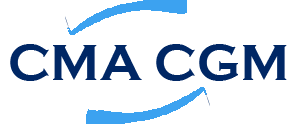
<style>
.page{position:relative;width:302px;height:125px;background:#ffffff}
.page>*{position:absolute;margin:0}
.t1{font:51.8px "CopperplateGothic-Bold";color:#002765}
</style>
<div class="page">
<p class="t1" style="left:10px;top:44px;width:277px;height:37px">CMA CGM</p>
</div>
